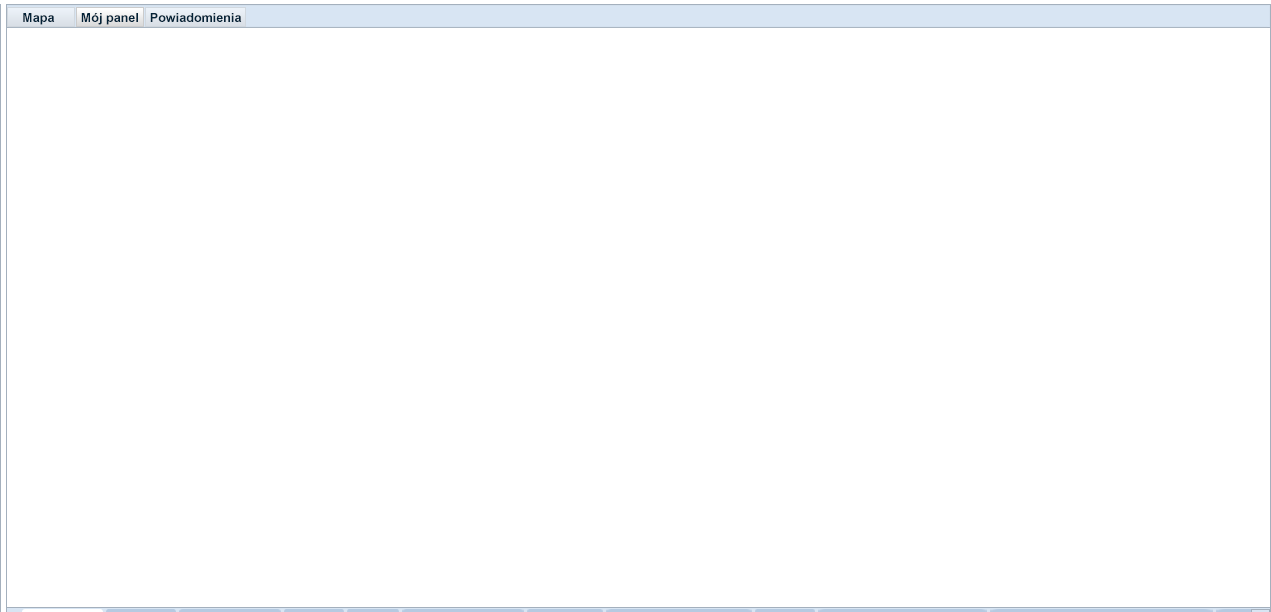
<style>
.page{position:relative;width:1271px;height:612px;background:#ffffff}
.page>*{position:absolute;margin:0}
.t1{font:12.6px "Arial-BoldMT";color:#042338}
</style>
<div class="page">
<p class="t1" style="left:23px;top:13px;width:32px;height:12px">Mapa</p>
<p class="t1" style="left:81px;top:13px;width:57px;height:12px">Mój panel</p>
<p class="t1" style="left:150px;top:13px;width:92px;height:9px">Powiadomienia</p>
</div>
